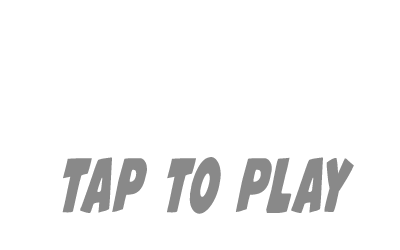
<style>
.page{position:relative;width:400px;height:250px;background:#ffffff}
.page>*{position:absolute;margin:0}
.t1{font:76.7px "Jack'sCandlestickExtra-condensed";letter-spacing:0.04em;color:#898989;scale:0.89 1}
</style>
<div class="page">
<p class="t1" style="left:62px;top:157px;width:292px;height:57px">TAp To Play</p>
</div>
